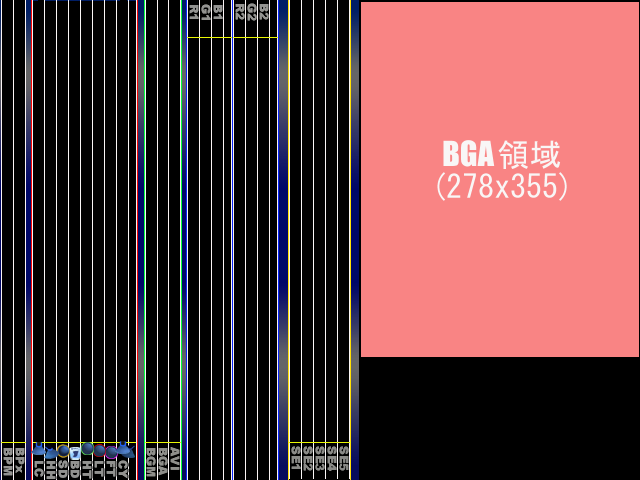
<style>
.page{position:relative;width:640px;height:480px;background:#000000}
.page>*{position:absolute;margin:0}
.t1{font:12px/12px "Arial-Black";color:#929290}
.t2{font:12px/12px "ArialMT";color:#929290}
.t3{font:12px/12px "Arial-Black";color:#949491}
.t4{font:12px/12px "ArialMT";color:#949491}
.t5{font:12px/12px "Arial-Black";color:#8e8e8a}
.t6{font:12px/12px "Arial-Black";color:#8a8a87}
</style>
<div class="page">
<p class="t1" style="left:189px;top:4px;width:34px;height:16px"><span class="t2"><br></span>B1<br>G1<br>R1</p>
<p class="t3" style="left:235px;top:3px;width:34px;height:18px"><span class="t4"><br></span>B2<br>G2<br>R2</p>
<p class="t1" style="left:3px;top:448px;width:22px;height:28px">BPx<br>BPM</p>
<p class="t5" style="left:146px;top:447px;width:34px;height:30px">AVI<br>BGA<br>BGM</p>
<p class="t6" style="left:291px;top:446px;width:58px;height:25px">SE5<br>SE4<br>SE3<br>SE2<br>SE1</p>
<p class="t1" style="left:34px;top:460px;width:94px;height:19px">CY<br>FT<br>LT<br>HT<br>BD<br>SD<br>HH<br>LC</p>
</div>
